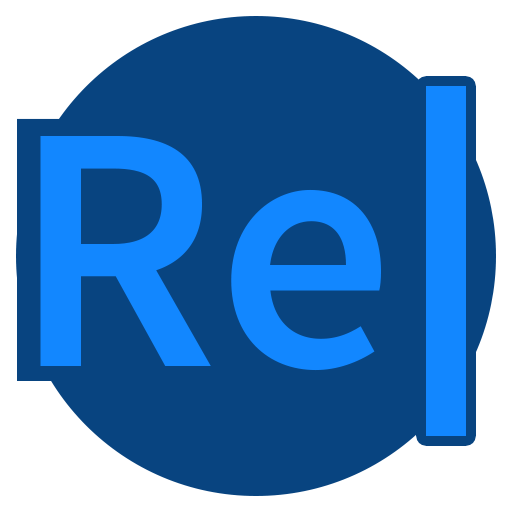
<style>
.page{position:relative;width:512px;height:512px;background:#084480}
.page>*{position:absolute;margin:0}
.t1{font:400px "SourceSansPro-Semibold"}
.t2{font:350px "SourceSansPro-Semibold";color:#1287ff}
</style>
<div class="page">
<p class="t1" style="left:17px;top:118px;width:389px;height:268px">Re</p>
<p class="t2" style="left:40px;top:136px;width:341px;height:235px">Re</p>
</div>
